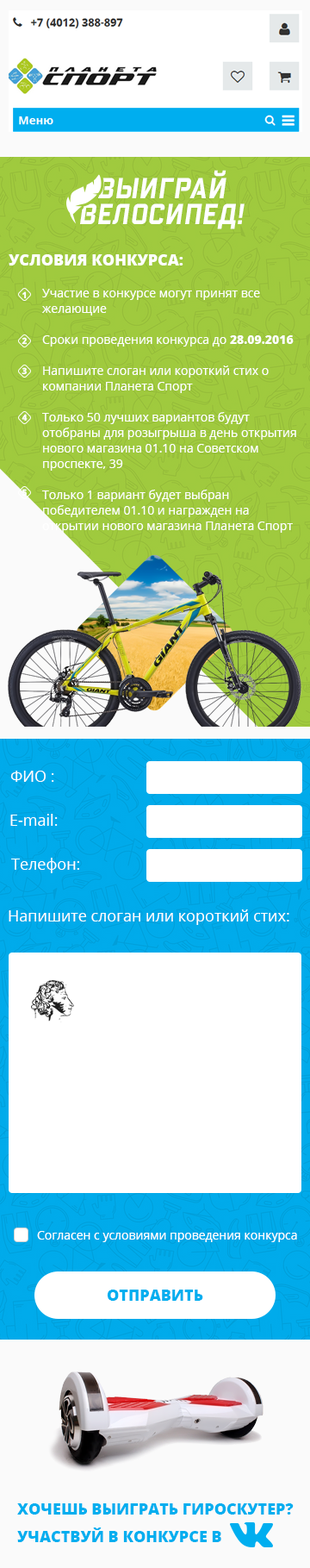
<style>
.page{position:relative;width:310px;height:1568px;background:#ffffff}
.page>*{position:absolute;margin:0}
.t1{font:39px/25.3px "Febrotesk4FUnicase-BoldItalic";letter-spacing:0.025em;color:#ffffff;text-transform:uppercase}
.t2{font:15.5px "OpenSans-Extrabold";color:#ffffff;text-transform:uppercase}
.t3{font:8.6px "OpenSans-Extrabold";color:#ffffff}
.t4{font:12.1px/15.5px "OpenSans";color:#ffffff}
.t5{font:12.1px/15.5px "OpenSans-Extrabold";color:#ffffff}
.t6{font:15.5px "OpenSans";color:#ffffff}
.t7{font:12.1px "OpenSans";color:#ffffff}
.t8{font:15.5px "OpenSans-Extrabold";color:#00aeef;text-transform:uppercase}
.t9{font:15.5px/27.6px "OpenSans-Extrabold";color:#00aeef;text-transform:uppercase}
</style>
<div class="page">
<p class="t1" style="left:80px;top:170px;width:165px;height:59px;text-align:center">ВЫИГРАЙ<br>ВЕЛОСИПЕД!</p>
<p class="t2" style="left:9px;top:254px;width:175px;height:11px">УСЛОВИЯ КОНКУРСА:</p>
<p class="t3" style="left:22px;top:291px;width:5px;height:8px">1</p>
<p class="t4" style="left:42px;top:289px;width:255px;height:244px">Участие в конкурсе могут принят все желающие<br><br>Сроки проведения конкурса до <span class="t5">28.09.2016<br></span><br>Напишите слоган или короткий стих о компании Планета Спорт<br><br>Только 50 лучших вариантов будут отобраны для розыгрыша в день открытия нового магазина 01.10 на Советском проспекте, 39<br><br>Только 1 вариант будет выбран победителем 01.10 и награжден на открытии нового магазина Планета Спорт</p>
<p class="t3" style="left:22px;top:337px;width:6px;height:8px">2</p>
<p class="t3" style="left:22px;top:367px;width:5px;height:8px">3</p>
<p class="t3" style="left:22px;top:414px;width:6px;height:8px">4</p>
<p class="t3" style="left:22px;top:489px;width:5px;height:8px">5</p>
<p class="t6" style="left:10px;top:771px;width:44px;height:11px">ФИО :</p>
<p class="t6" style="left:10px;top:814px;width:48px;height:12px">Е-mail:</p>
<p class="t6" style="left:11px;top:858px;width:68px;height:15px">Телефон:</p>
<p class="t6" style="left:9px;top:909px;width:281px;height:16px">Напишите слоган или короткий стих:</p>
<p class="t7" style="left:37px;top:1231px;width:260px;height:11px">Согласен с условиями проведения конкурса</p>
<p class="t8" style="left:107px;top:1290px;width:96px;height:11px">отправить</p>
<p class="t9" style="left:17px;top:1503px;width:277px;height:39px">ХОЧЕШЬ ВЫИГРАТЬ ГИРОСКУТЕР? <br>Участвуй в конкурсе в</p>
</div>
